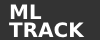
<style>
.page{position:relative;width:100px;height:40px;background:#333333}
.page>*{position:absolute;margin:0}
.t1{font:20px "DejaVuSans-Bold";color:#ffffff}
</style>
<div class="page">
<p class="t1" style="left:10px;top:4px;width:32px;height:15px">ML</p>
<p class="t1" style="left:9px;top:22px;width:76px;height:16px">TRACK</p>
</div>
